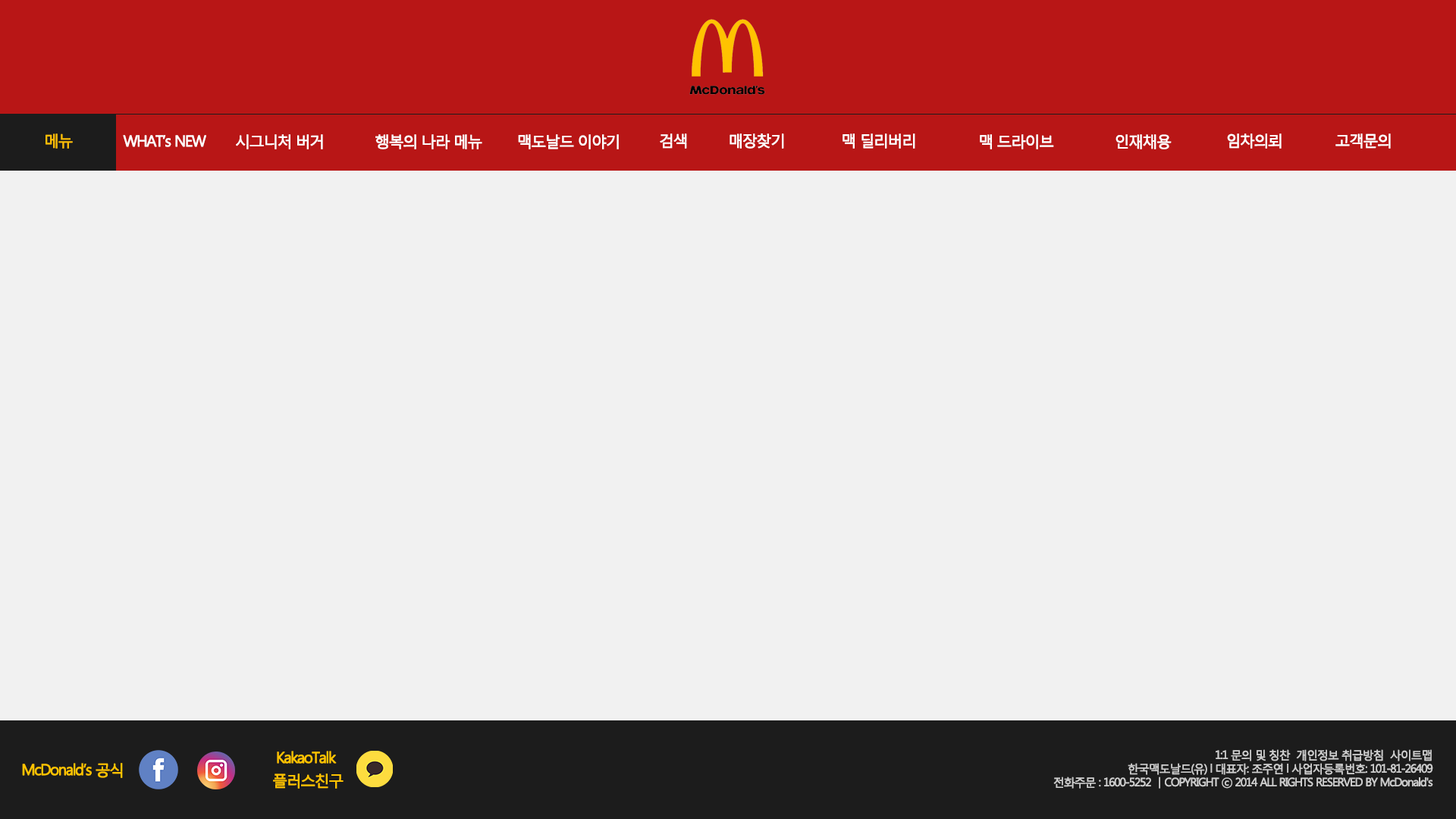
<style>
.page{position:relative;width:1456px;height:819px;background:#f1f1f1}
.page>*{position:absolute;margin:0}
.t1{font:15.2px "MalgunGothicRegular";letter-spacing:-0.1em;color:#fbbd06;font-weight:bold}
.t2{font:15.2px "MalgunGothicRegular";letter-spacing:-0.1em;color:#ffffff;font-weight:bold}
.t3{font:11.4px/13.6px "MalgunGothicRegular";letter-spacing:-0.1em;color:#cdcdcd;font-weight:bold}
.t4{font:15.2px/22.7px "MalgunGothicRegular";letter-spacing:-0.1em;color:#ffc300;font-weight:bold}
.t5{font:15.2px "MalgunGothicRegular";letter-spacing:-0.1em;color:#ffc300;font-weight:bold}
</style>
<div class="page">
<p class="t1" style="left:45px;top:133px;width:28px;height:16px">메뉴</p>
<p class="t2" style="left:123px;top:135px;width:83px;height:12px">WHAT’s NEW</p>
<p class="t2" style="left:236px;top:134px;width:87px;height:15px">시그니처 버거</p>
<p class="t2" style="left:375px;top:134px;width:107px;height:15px">행복의 나라 메뉴</p>
<p class="t2" style="left:518px;top:134px;width:101px;height:15px">맥도날드 이야기</p>
<p class="t2" style="left:660px;top:133px;width:27px;height:16px">검색</p>
<p class="t2" style="left:730px;top:133px;width:54px;height:16px">매장찾기</p>
<p class="t2" style="left:842px;top:133px;width:73px;height:16px">맥 딜리버리</p>
<p class="t2" style="left:980px;top:134px;width:74px;height:15px">맥 드라이브</p>
<p class="t2" style="left:1115px;top:134px;width:57px;height:15px">인재채용</p>
<p class="t2" style="left:1227px;top:133px;width:55px;height:16px">임차의뢰</p>
<p class="t2" style="left:1335px;top:133px;width:56px;height:16px">고객문의</p>
<p class="t3" style="left:1053px;top:749px;width:380px;height:40px;text-align:right">1:1 문의 및 칭찬  개인정보 취급방침  사이트맵<br>한국맥도날드(유) l 대표자: 조주연 l 사업자등록번호: 101-81-26409<br>전화주문 : 1600-5252 ㅣCOPYRIGHT ⓒ 2014 ALL RIGHTS RESERVED BY McDonald's</p>
<p class="t4" style="left:273px;top:751px;width:71px;height:38px;text-align:center">KakaoTalk <br>플러스친구</p>
<p class="t5" style="left:22px;top:763px;width:101px;height:15px">McDonald’s 공식</p>
</div>
